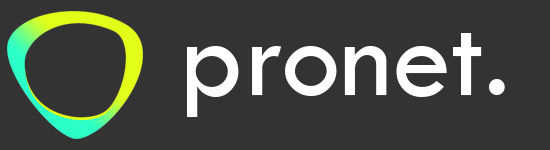
<style>
.page{position:relative;width:550px;height:150px;background:#333333}
.page>*{position:absolute;margin:0}
.t1{font:118.5px "TwCenMT-Regular";color:#ffffff}
</style>
<div class="page">
<p class="t1" style="left:187px;top:33px;width:318px;height:84px">pronet.</p>
</div>
